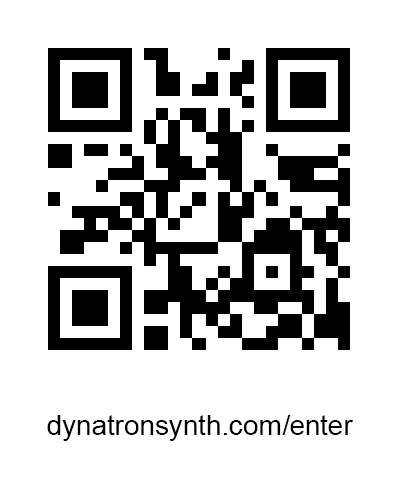
<style>
.page{position:relative;width:400px;height:500px;background:#ffffff}
.page>*{position:absolute;margin:0}
.t1{font:28.4px "ArialMT";color:#000000}
</style>
<div class="page">
<p class="t1" style="left:47px;top:415px;width:306px;height:26px">dynatronsynth.com/enter</p>
</div>
